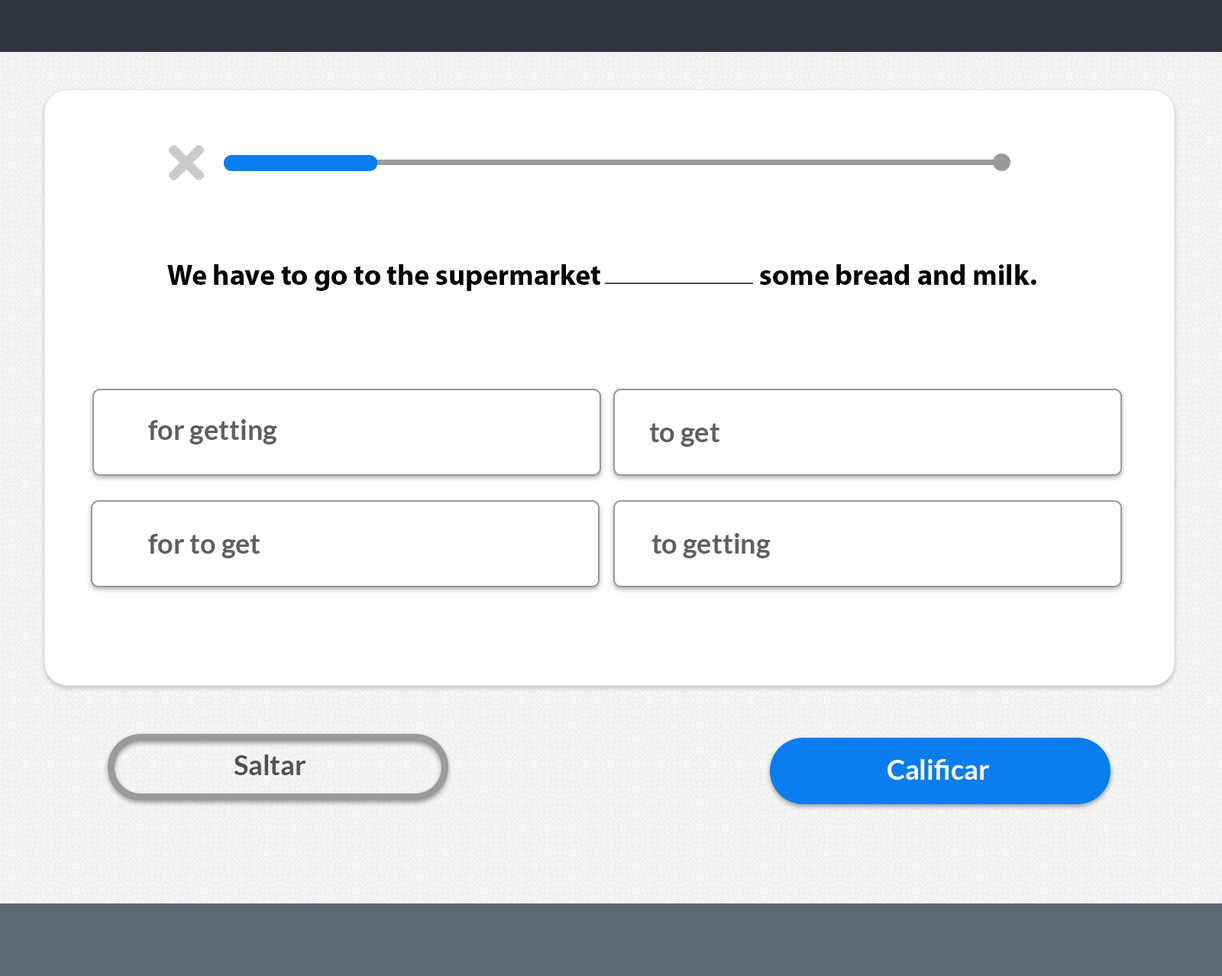
<style>
.page{position:relative;width:1222px;height:976px;background:#ffffff}
.page>*{position:absolute;margin:0}
.t1{font:29px "MyriadPro-Bold";color:#000000}
.t2{font:27.5px "Lato-Bold";color:#5d5f60}
.t3{font:27.5px "Lato-Bold";color:#535151}
.t4{font:27.5px "Lato-Bold";color:#ffffff}
</style>
<div class="page">
<p class="t1" style="left:167px;top:264px;width:869px;height:27px">We have to go to the supermarket                           some bread and milk.</p>
<p class="t2" style="left:148px;top:419px;width:129px;height:25px">for getting</p>
<p class="t2" style="left:649px;top:423px;width:71px;height:24px">to get</p>
<p class="t2" style="left:148px;top:534px;width:112px;height:24px">for to get</p>
<p class="t2" style="left:651px;top:533px;width:120px;height:25px">to getting</p>
<p class="t3" style="left:234px;top:754px;width:72px;height:21px">Saltar</p>
<p class="t4" style="left:887px;top:759px;width:103px;height:21px">Calificar</p>
</div>
